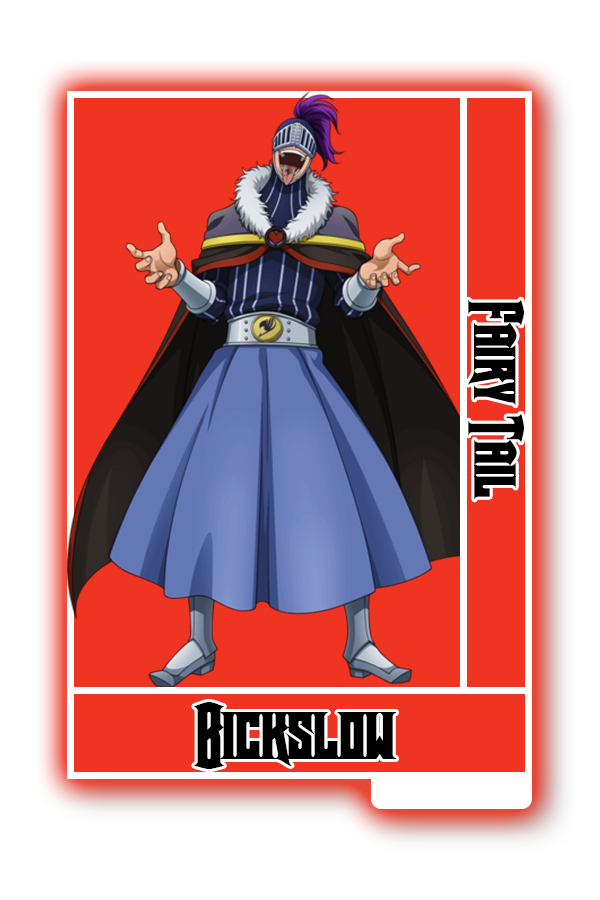
<style>
.page{position:relative;width:600px;height:900px;background:#ffffff}
.page>*{position:absolute;margin:0}
.t1{font:61.5px "Crown-Title";color:#000000}
.t2{font:70.1px "Crown-Title";color:#000000}
</style>
<div class="page">
<p class="t1" style="left:468px;top:299px;width:56px;height:201px;rotate:90deg">Fairy Tail</p>
<p class="t2" style="left:194px;top:702px;width:202px;height:67px">Bickslow</p>
</div>
